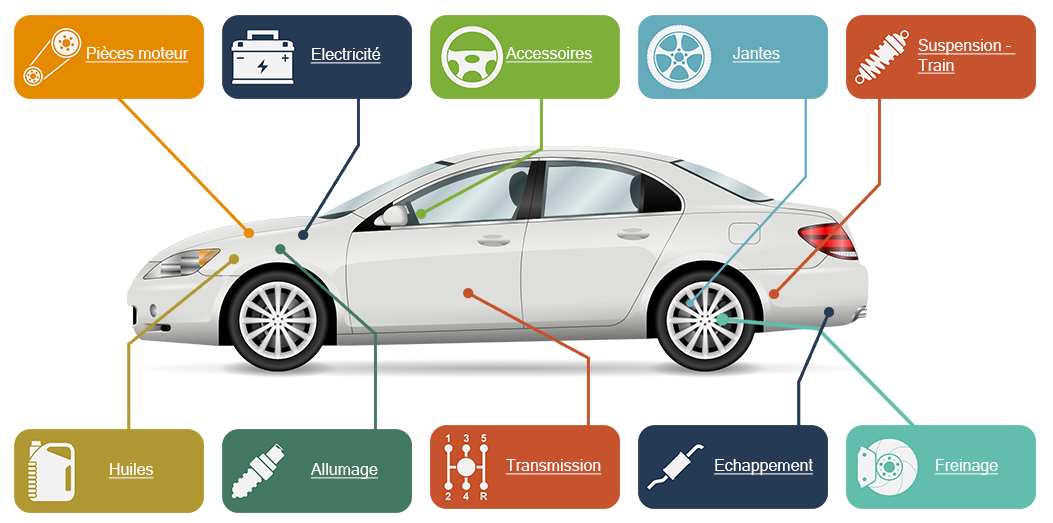
<style>
.page{position:relative;width:1053px;height:523px;background:#ffffff}
.page>*{position:absolute;margin:0}
.t1{font:16px "MicrosoftSansSerif";color:#ffffff;text-decoration:underline}
</style>
<div class="page">
<p class="t1" style="left:917px;top:39px;width:99px;height:35px">Suspension - <br>Train</p>
<p class="t1" style="left:85px;top:46px;width:104px;height:17px">Pièces moteur</p>
<p class="t1" style="left:310px;top:47px;width:71px;height:17px">Electricité</p>
<p class="t1" style="left:505px;top:47px;width:88px;height:16px">Accessoires</p>
<p class="t1" style="left:732px;top:47px;width:48px;height:16px">Jantes</p>
<p class="t1" style="left:505px;top:459px;width:97px;height:16px">Transmission</p>
<p class="t1" style="left:714px;top:459px;width:99px;height:16px">Echappement</p>
<p class="t1" style="left:934px;top:459px;width:65px;height:16px">Freinage</p>
<p class="t1" style="left:108px;top:463px;width:46px;height:16px">Huiles</p>
<p class="t1" style="left:310px;top:463px;width:68px;height:16px">Allumage</p>
</div>
